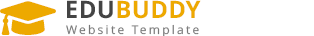
<style>
.page{position:relative;width:314px;height:36px;background:#ffffff}
.page>*{position:absolute;margin:0}
.t1{font:24px "OpenSans-Bold";letter-spacing:0.025em;color:#eda900;text-transform:uppercase}
.t2{font:24px "OpenSans-Bold";letter-spacing:0.025em;color:#444444;text-transform:uppercase}
.t3{font:12px "OpenSans-Regular";letter-spacing:0.195em;color:#777777}
</style>
<div class="page">
<p class="t1" style="left:67px;top:0px;width:134px;height:19px"><span class="t2">Edu</span>Buddy</p>
<p class="t3" style="left:66px;top:24px;width:133px;height:14px">Website Template</p>
</div>
